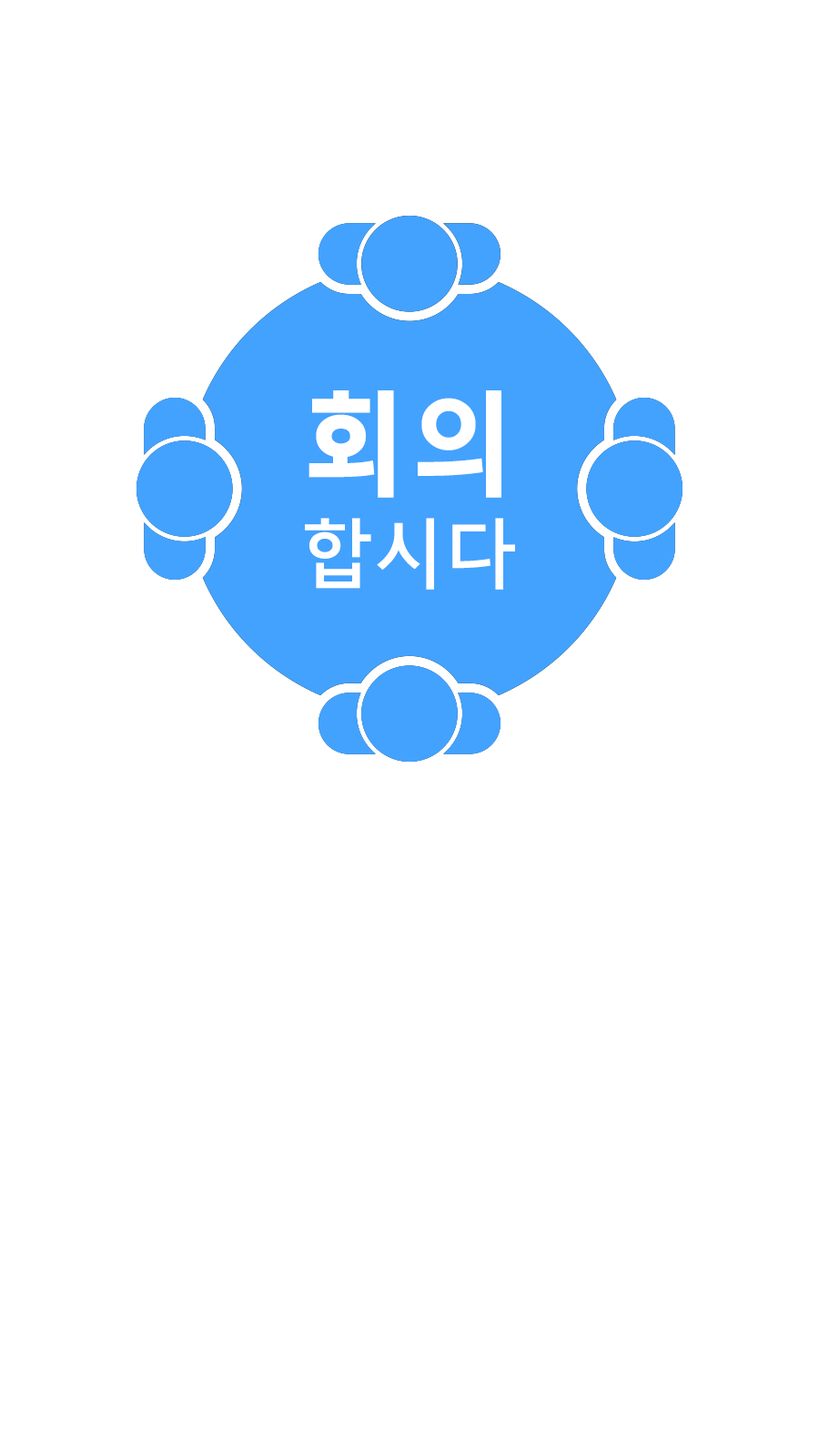
<style>
.page{position:relative;width:819px;height:1456px;background:#ffffff}
.page>*{position:absolute;margin:0}
.t1{font:75.8px/132.7px "THEJung150";color:#ffffff}
.t2{font:113.7px/132.7px "THEJung170";color:#ffffff}
</style>
<div class="page">
<p class="t1" style="left:305px;top:390px;width:210px;height:200px;text-align:center"><span class="t2">회의<br></span>합시다</p>
</div>
